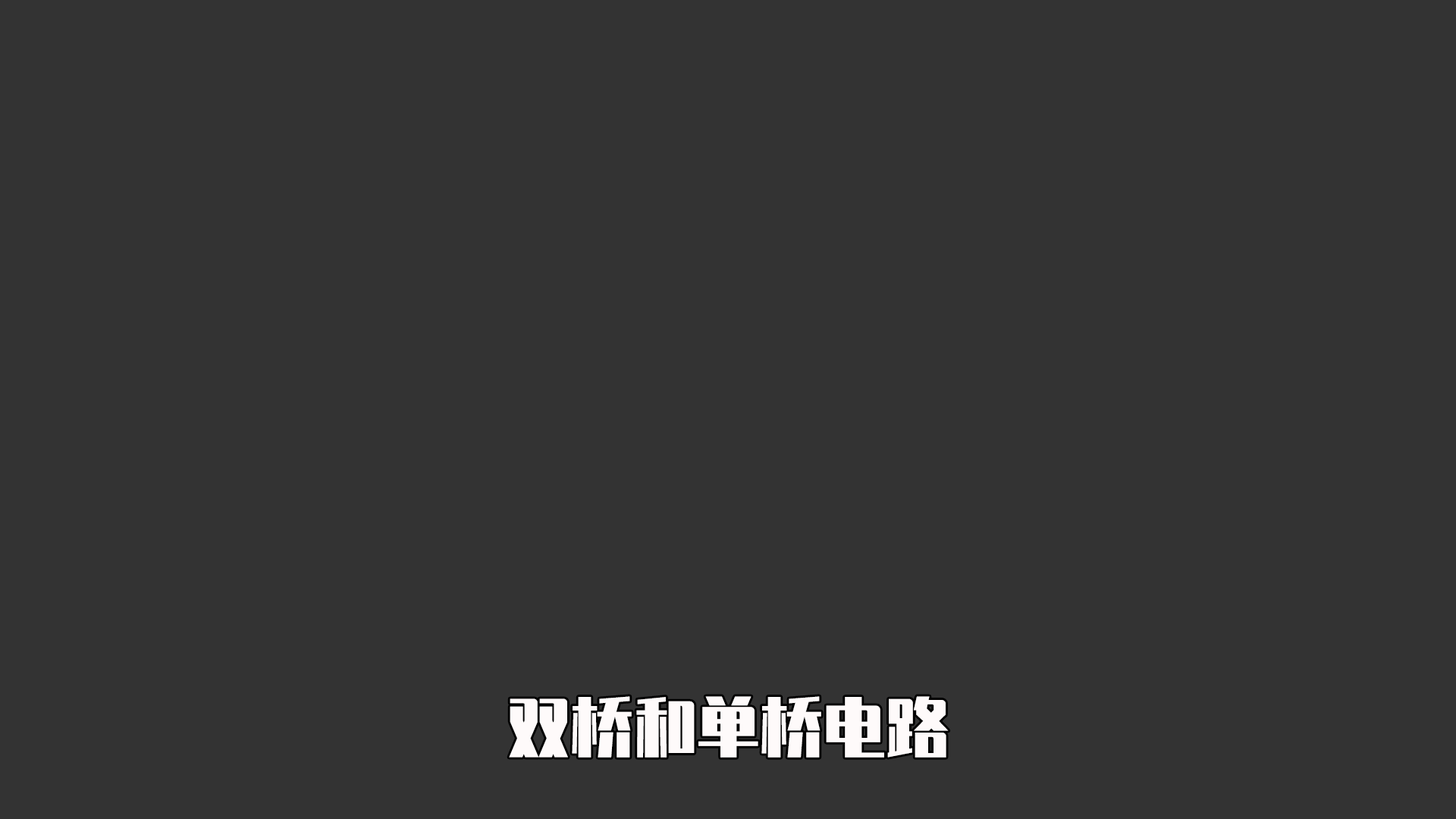
<style>
.page{position:relative;width:1456px;height:819px;background:#333333}
.page>*{position:absolute;margin:0}
.t1{font:63.2px "ZhenyanGB-Regular";color:#fefafa}
</style>
<div class="page">
<p class="t1" style="left:509px;top:696px;width:440px;height:62px">双桥和单桥电路</p>
</div>
